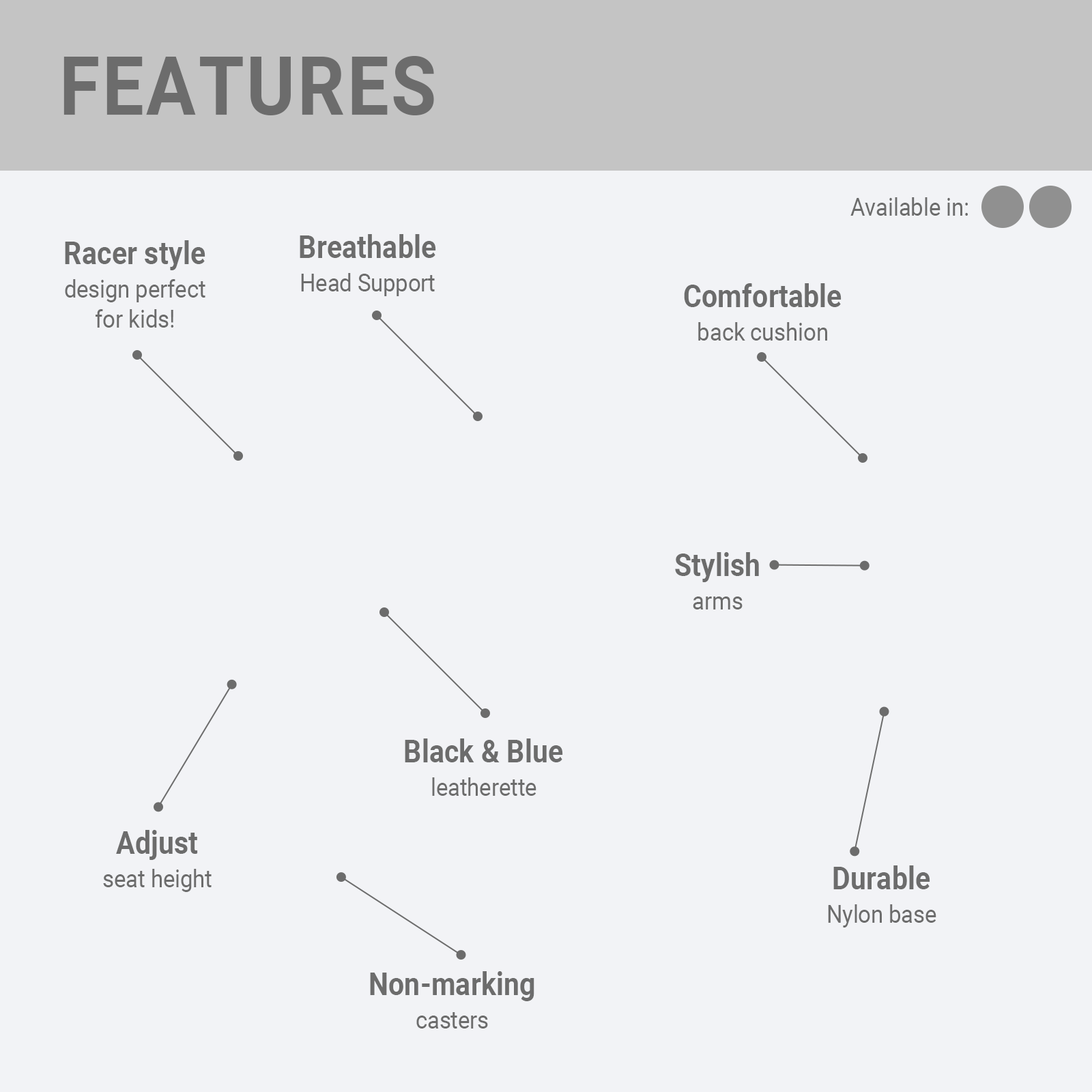
<style>
.page{position:relative;width:1092px;height:1092px;background:#f2f3f6}
.page>*{position:absolute;margin:0}
.t1{font:81.9px "Roboto-Bold";color:#6c6c6c;text-transform:uppercase;scale:0.9 1}
.t2{font:24.8px "Roboto-Regular";color:#6c6c6c;scale:0.9 1}
.t3{font:31.4px "Roboto-Bold";color:#6c6c6c;scale:0.9 1}
</style>
<div class="page">
<p class="t1" style="left:63px;top:56px;width:371px;height:59px">Features</p>
<p class="t2" style="left:850px;top:197px;width:118px;height:19px">Available in:</p>
<p class="t3" style="left:65px;top:240px;width:140px;height:30px">Racer style</p>
<p class="t3" style="left:300px;top:234px;width:136px;height:24px">Breathable</p>
<p class="t2" style="left:65px;top:279px;width:140px;height:49px;text-align:center">design perfect<br>for kids!</p>
<p class="t2" style="left:301px;top:273px;width:134px;height:23px">Head Support</p>
<p class="t3" style="left:684px;top:283px;width:158px;height:24px">Comfortable</p>
<p class="t2" style="left:698px;top:322px;width:129px;height:19px">back cushion</p>
<p class="t3" style="left:675px;top:552px;width:84px;height:30px">Stylish</p>
<p class="t2" style="left:693px;top:596px;width:50px;height:13px">arms</p>
<p class="t3" style="left:405px;top:738px;width:158px;height:24px">Black &amp; Blue</p>
<p class="t2" style="left:432px;top:777px;width:104px;height:19px">leatherette</p>
<p class="t3" style="left:116px;top:830px;width:82px;height:30px">Adjust</p>
<p class="t2" style="left:103px;top:869px;width:109px;height:23px">seat height</p>
<p class="t3" style="left:833px;top:865px;width:97px;height:24px">Durable</p>
<p class="t2" style="left:828px;top:904px;width:108px;height:24px">Nylon base</p>
<p class="t3" style="left:370px;top:971px;width:164px;height:30px">Non-marking</p>
<p class="t2" style="left:416px;top:1012px;width:72px;height:17px">casters</p>
</div>
